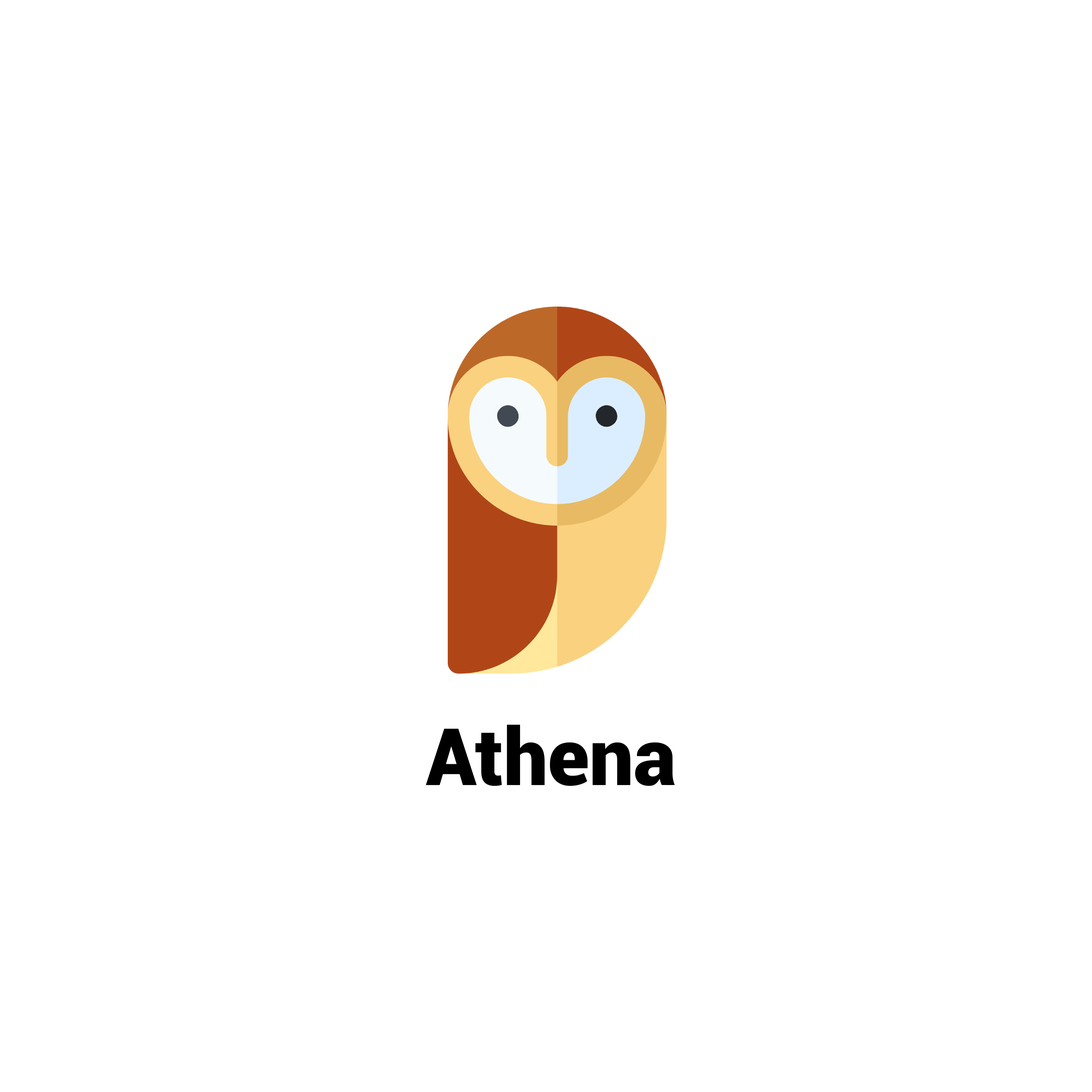
<style>
.page{position:relative;width:1092px;height:1092px;background:#ffffff}
.page>*{position:absolute;margin:0}
.t1{font:79.1px "Roboto-Black";color:#000000}
</style>
<div class="page">
<p class="t1" style="left:426px;top:725px;width:249px;height:61px">Athena</p>
</div>
